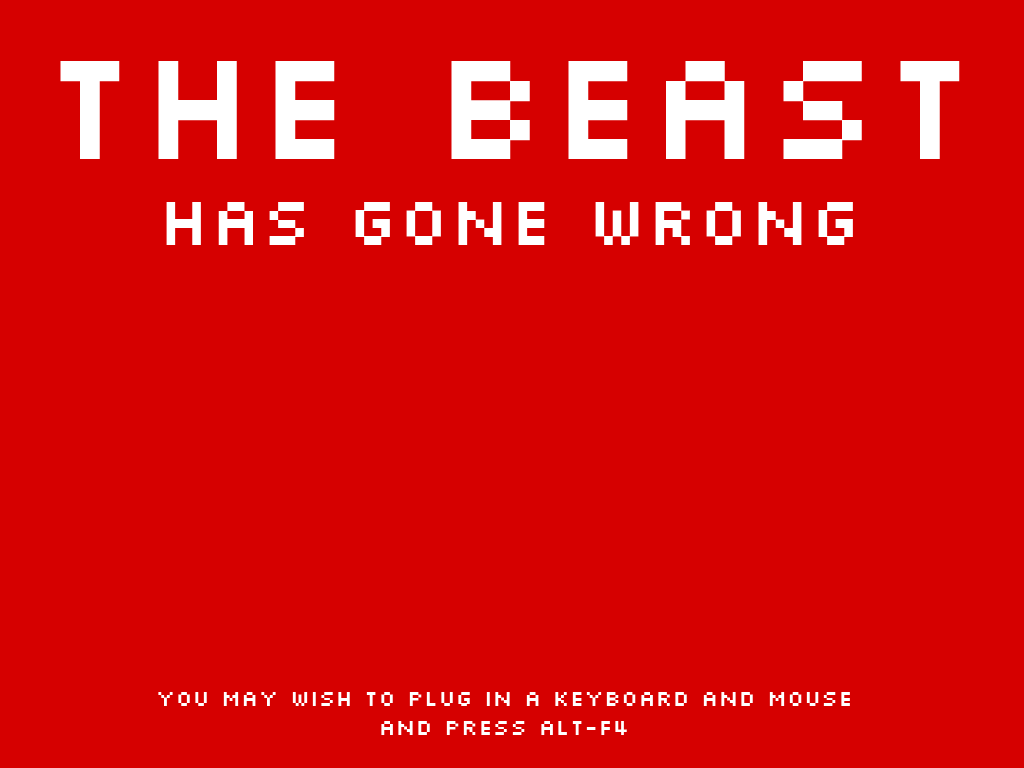
<style>
.page{position:relative;width:1024px;height:768px;background:#d60000}
.page>*{position:absolute;margin:0}
.t1{font:24px "Silkscreen";color:#ffffff}
.t2{font:164px "Silkscreen";color:#ffffff}
.t3{font:72px "Silkscreen";color:#ffffff}
</style>
<div class="page">
<p class="t1" style="left:60px;top:61px;width:900px;height:674px;text-align:center"><span class="t2">The Beast<br></span><span class="t3">has gone wrong<br></span><br><br><br><br><br><br><br><br><br><br><br><br><br><br><br>you may wish to plug in a keyboard and mouse <br>and press alt-f4</p>
</div>
